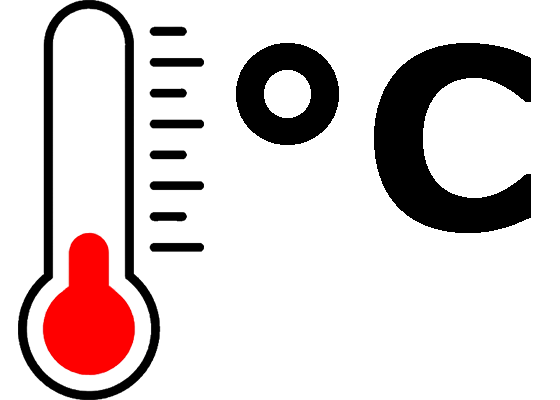
<style>
.page{position:relative;width:560px;height:400px;background:#ffffff}
.page>*{position:absolute;margin:0}
.t1{font:250px "Verdana-Bold";color:#000000}
</style>
<div class="page">
<p class="t1" style="left:236px;top:43px;width:295px;height:190px">°C</p>
</div>
